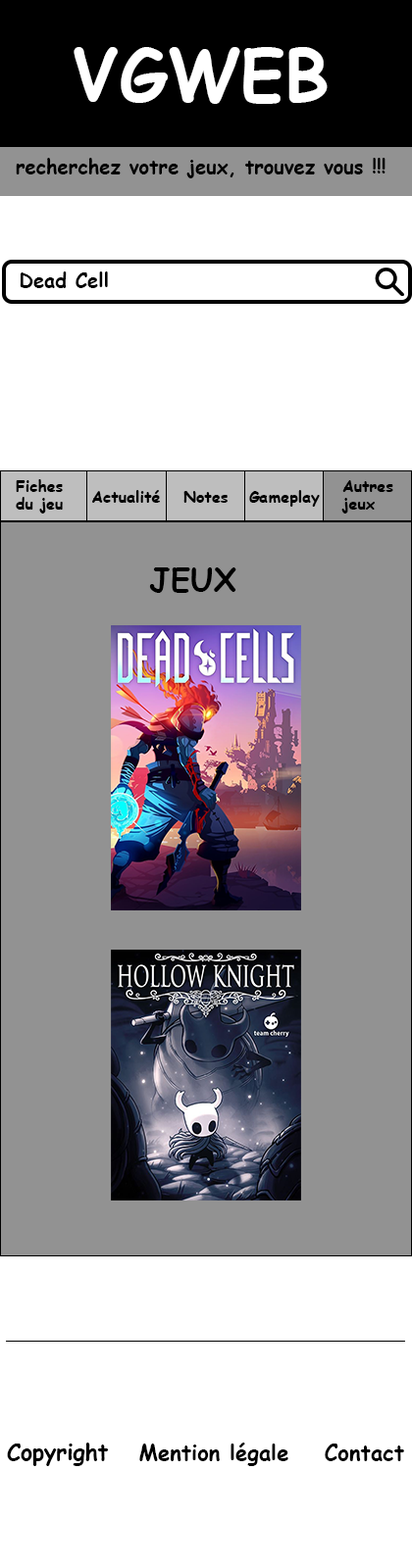
<style>
.page{position:relative;width:412px;height:1568px;background:#ffffff}
.page>*{position:absolute;margin:0}
.t1{font:70.6px "ComicSansMS-Bold";color:#ffffff}
.t2{font:19.6px "ComicSansMS-Bold";color:#000000}
.t3{font:15.7px/17.3px "ComicSansMS-Bold";color:#000000}
.t4{font:15.7px "ComicSansMS-Bold";color:#000000}
.t5{font:31.7px "ComicSansMS-Bold";color:#000000}
.t6{font:22.1px "ComicSansMS-Bold";color:#000000}
.t7{font:21.6px "ComicSansMS-Bold";color:#000000}
.t8{font:21.7px "ComicSansMS-Bold";color:#000000}
</style>
<div class="page">
<p class="t1" style="left:74px;top:47px;width:253px;height:57px">VGWEB</p>
<p class="t2" style="left:16px;top:158px;width:369px;height:20px">recherchez votre jeux, trouvez vous !!!</p>
<p class="t2" style="left:20px;top:271px;width:88px;height:17px">Dead Cell</p>
<p class="t3" style="left:16px;top:479px;width:47px;height:35px">Fiches <br>du jeu</p>
<p class="t3" style="left:341px;top:480px;width:52px;height:34px">Autres jeux</p>
<p class="t4" style="left:92px;top:490px;width:68px;height:13px">Actualité</p>
<p class="t4" style="left:183px;top:491px;width:44px;height:12px">Notes</p>
<p class="t4" style="left:249px;top:490px;width:70px;height:17px">Gameplay</p>
<p class="t5" style="left:149px;top:567px;width:87px;height:26px">JEUX</p>
<p class="t6" style="left:7px;top:1443px;width:102px;height:23px">Copyright</p>
<p class="t7" style="left:139px;top:1443px;width:149px;height:23px">Mention légale</p>
<p class="t8" style="left:324px;top:1444px;width:80px;height:17px">Contact</p>
</div>
